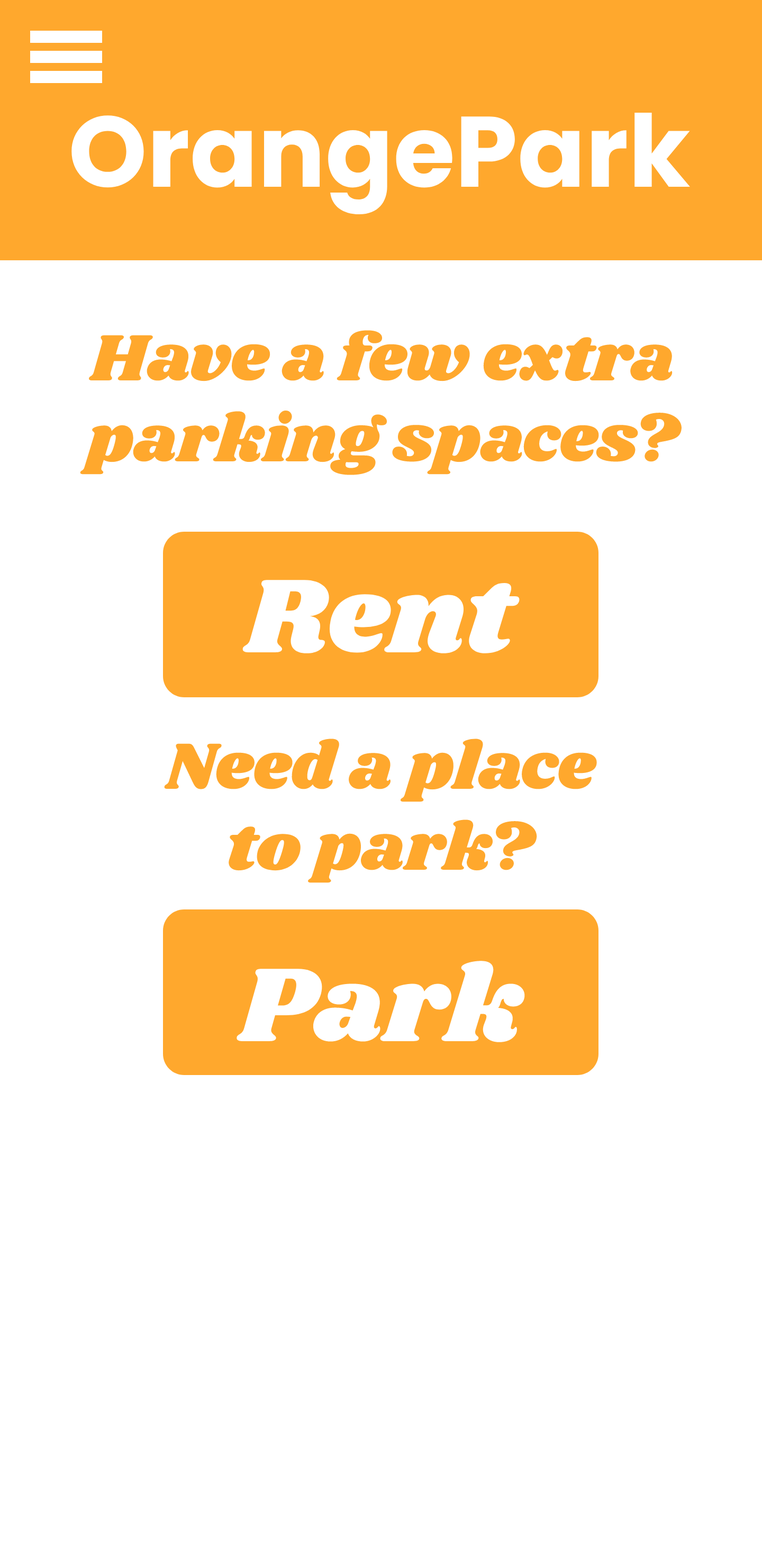
<style>
.page{position:relative;width:762px;height:1566px;background:#ffffff}
.page>*{position:absolute;margin:0}
.t1{font:100.1px "Poppins-Bold";color:#ffffff}
.t2{font:67.7px "Shrikhand-Regular";color:#ffa82d}
.t3{font:108.6px "Shrikhand-Regular";color:#ffffff}
</style>
<div class="page">
<p class="t1" style="left:71px;top:113px;width:619px;height:101px">OrangePark</p>
<p class="t2" style="left:80px;top:330px;width:601px;height:145px;text-align:center">Have a few extra<br>parking spaces?</p>
<p class="t3" style="left:242px;top:580px;width:277px;height:73px">Rent</p>
<p class="t2" style="left:164px;top:738px;width:434px;height:145px;text-align:center">Need a place<br>to park?</p>
<p class="t3" style="left:236px;top:961px;width:290px;height:81px">Park</p>
</div>
